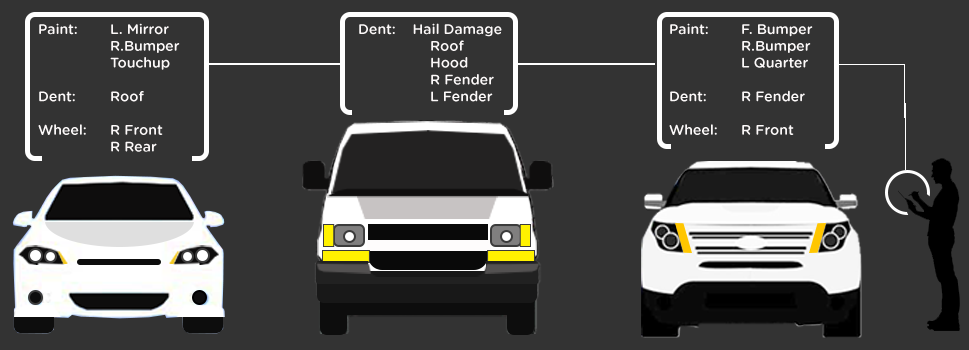
<style>
.page{position:relative;width:969px;height:350px;background:#333333}
.page>*{position:absolute;margin:0}
.t1{font:14px "GothamRounded-Medium";color:#fcf9f9}
</style>
<div class="page">
<p class="t1" style="left:38px;top:23px;width:142px;height:129px">Paint:  L. Mirror<br>  R.Bumper<br>  Touchup<br><br>Dent:  Roof<br><br>Wheel: R Front<br>  R Rear</p>
<p class="t1" style="left:359px;top:23px;width:143px;height:79px">Dent:    Hail Damage<br>  Roof<br>  Hood<br>  R Fender<br>  L Fender</p>
<p class="t1" style="left:669px;top:23px;width:144px;height:112px">Paint:  F. Bumper<br>  R.Bumper<br>  L Quarter<br><br>Dent:  R Fender<br><br>Wheel: R Front</p>
</div>
